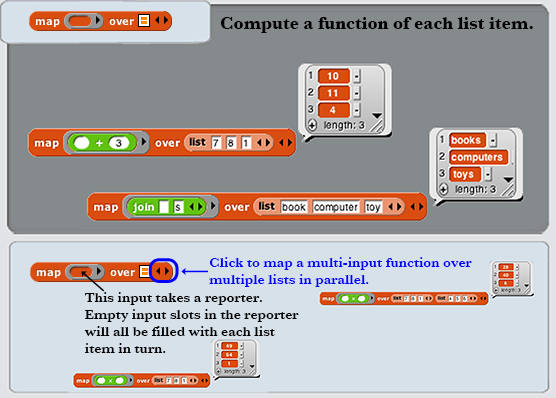
<style>
.page{position:relative;width:556px;height:398px;background:#858a8c}
.page>*{position:absolute;margin:0}
.t1{font:18px "Baskerville-Bold";color:#000000}
.t2{font:14px "Baskerville-SemiBold";color:#0000ff}
.t3{font:14px "Baskerville-SemiBold";color:#000000}
</style>
<div class="page">
<p class="t1" style="left:220px;top:17px;width:313px;height:16px">Compute a function of each list item.</p>
<p class="t2" style="left:209px;top:257px;width:263px;height:30px">Click to map a multi-input function over<br>multiple lists in parallel.</p>
<p class="t3" style="left:84px;top:292px;width:215px;height:61px">This input takes a reporter.<br>Empty input slots in the reporter<br>will all be filled with each list<br>item in turn.</p>
</div>
